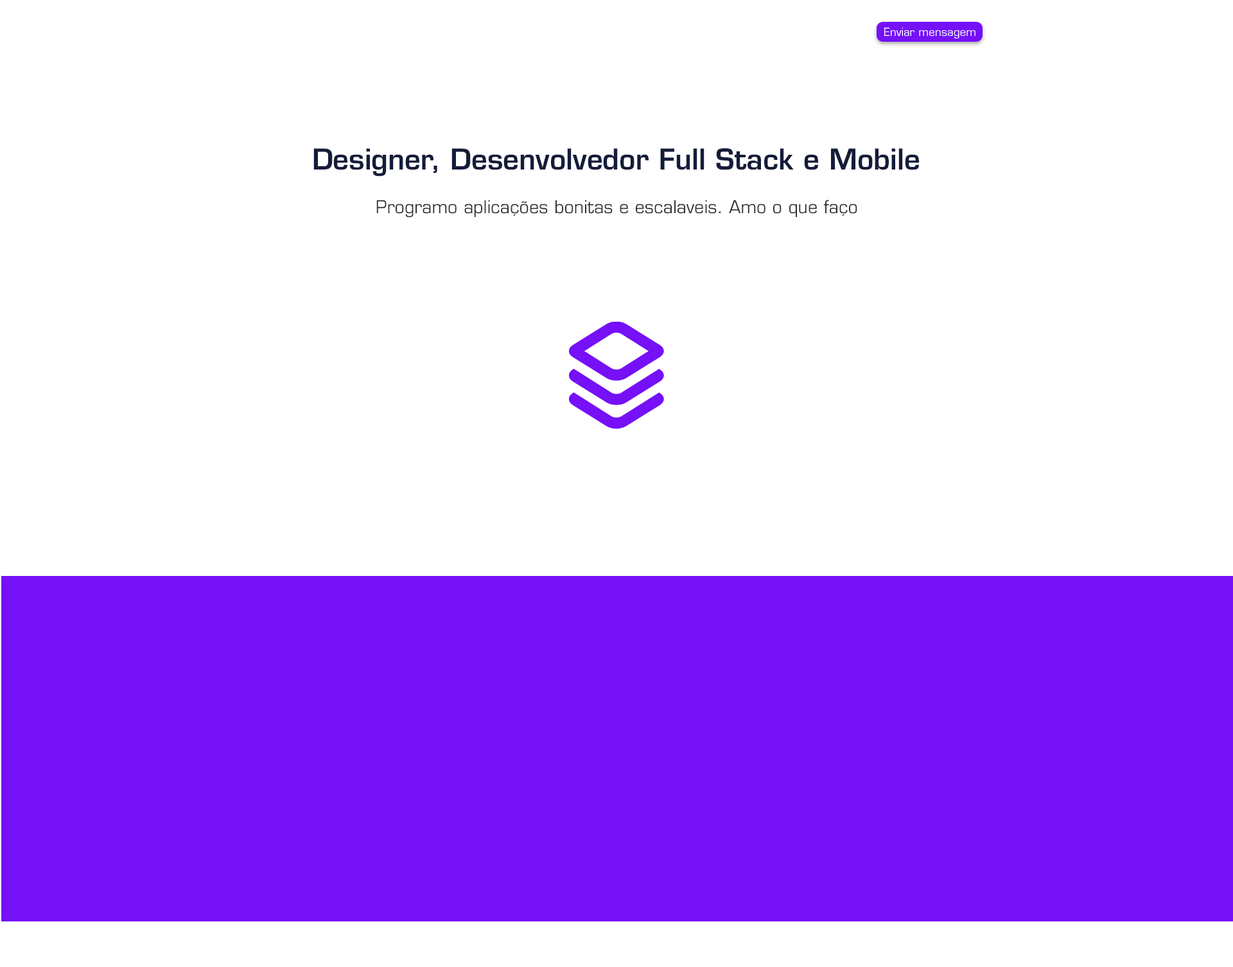
<style>
.page{position:relative;width:1233px;height:967px;background:#ffffff}
.page>*{position:absolute;margin:0}
.t1{font:11px "Eurostile";color:#ffffff}
.t2{font:28px "EurostileLTStd-Demi";color:#141c3a}
.t3{font:17.3px "Eurostile";color:#313131}
</style>
<div class="page">
<p class="t1" style="left:884px;top:28px;width:91px;height:11px">Enviar mensagem</p>
<p class="t2" style="left:313px;top:148px;width:606px;height:29px">Designer, Desenvolvedor Full Stack e Mobile</p>
<p class="t3" style="left:376px;top:200px;width:481px;height:18px">Programo aplicações bonitas e escalaveis. Amo o que faço</p>
</div>
